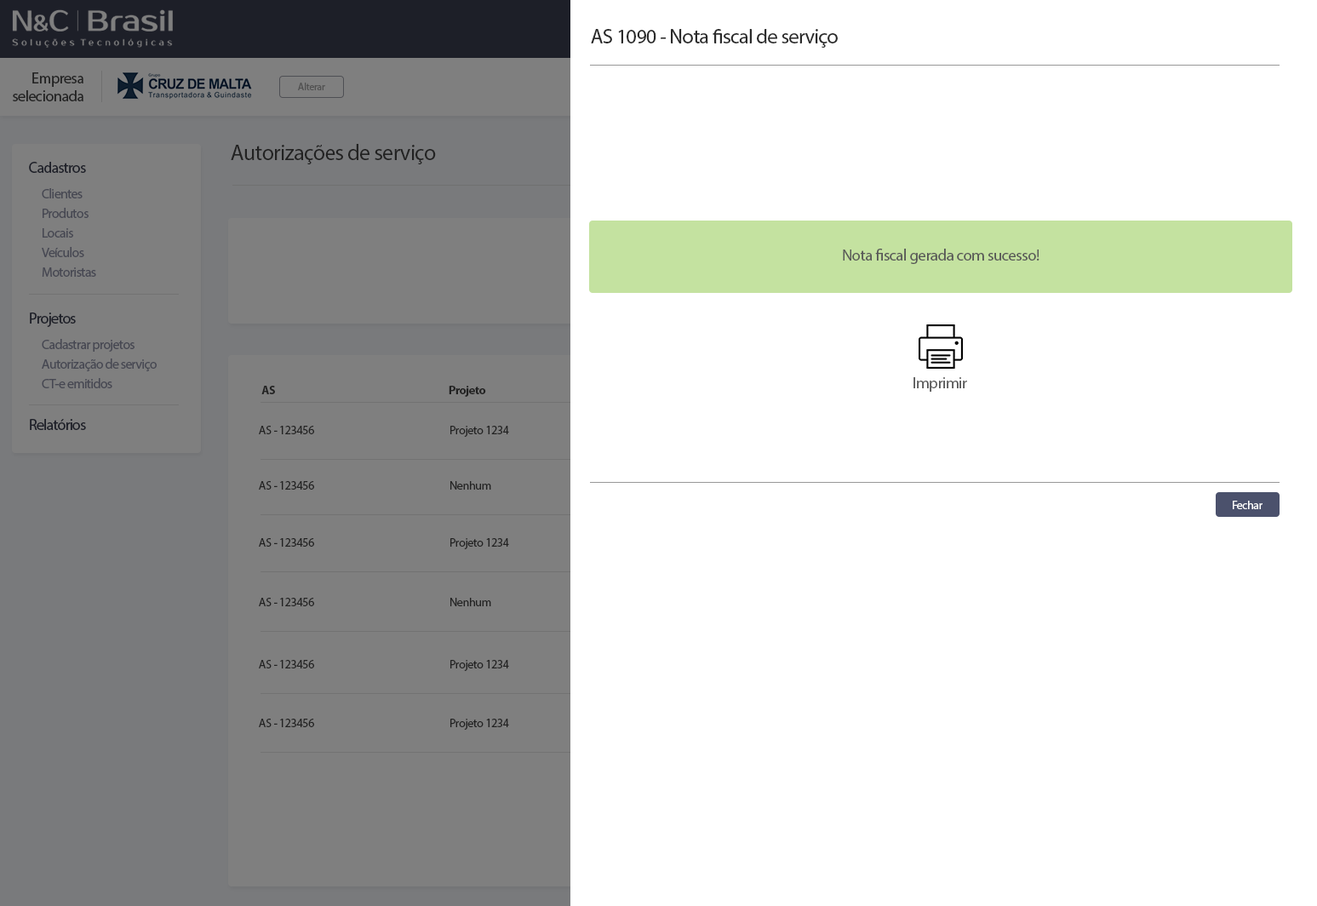
<style>
.page{position:relative;width:1317px;height:906px;background:#ffffff}
.page>*{position:absolute;margin:0}
.t1{font:20.4px "MyriadPro-Regular";letter-spacing:-0.025em;color:#2a2a2a}
.t2{font:15.3px/17.8px "MyriadPro-Regular";letter-spacing:-0.025em;color:#222222}
.t3{font:10.2px "MyriadPro-Regular";letter-spacing:-0.025em;color:#454545}
.t4{font:22.1px "MyriadPro-Regular";letter-spacing:-0.025em;color:#222222}
.t5{font:15.3px "MyriadPro-Regular";letter-spacing:-0.045em;color:#1d1f28}
.t6{font:13.6px "MyriadPro-Regular";letter-spacing:-0.045em;color:#464752}
.t7{font:15.9px "MyriadPro-Regular";letter-spacing:-0.025em;color:#575757}
.t8{font:13.6px "MyriadPro-Regular";letter-spacing:-0.045em;color:#464852}
.t9{font:11.9px "MyriadPro-Bold";letter-spacing:-0.025em;color:#222222}
.t10{font:11.9px "MyriadPro-Regular";letter-spacing:-0.025em;color:#222222}
.t11{font:11.7px "MyriadPro-Regular";letter-spacing:-0.025em;color:#ffffff}
</style>
<div class="page">
<p class="t1" style="left:591px;top:29px;width:247px;height:19px">AS 1090 - Nota fiscal de serviço</p>
<p class="t2" style="left:13px;top:72px;width:70px;height:29px;text-align:right">Empresa<br>selecionada</p>
<p class="t3" style="left:298px;top:83px;width:27px;height:7px">Alterar</p>
<p class="t4" style="left:231px;top:144px;width:205px;height:20px">Autorizações de serviço</p>
<p class="t5" style="left:29px;top:162px;width:57px;height:11px">Cadastros</p>
<p class="t6" style="left:42px;top:188px;width:41px;height:10px">Clientes</p>
<p class="t6" style="left:43px;top:208px;width:46px;height:10px">Produtos</p>
<p class="t6" style="left:43px;top:228px;width:30px;height:9px">Locais</p>
<p class="t6" style="left:42px;top:247px;width:42px;height:10px">Veículos</p>
<p class="t7" style="left:843px;top:249px;width:196px;height:15px">Nota fiscal gerada com sucesso!</p>
<p class="t6" style="left:42px;top:267px;width:54px;height:10px">Motoristas</p>
<p class="t5" style="left:30px;top:312px;width:46px;height:15px">Projetos</p>
<p class="t6" style="left:42px;top:339px;width:92px;height:13px">Cadastrar projetos</p>
<p class="t8" style="left:42px;top:358px;width:115px;height:13px">Autorização de serviço</p>
<p class="t6" style="left:42px;top:378px;width:70px;height:10px">CT-e emitidos</p>
<p class="t7" style="left:913px;top:377px;width:54px;height:15px">Imprimir</p>
<p class="t9" style="left:261px;top:386px;width:14px;height:8px">AS</p>
<p class="t9" style="left:449px;top:386px;width:37px;height:11px">Projeto</p>
<p class="t5" style="left:30px;top:419px;width:56px;height:11px">Relatórios</p>
<p class="t10" style="left:259px;top:426px;width:55px;height:8px">AS - 123456</p>
<p class="t10" style="left:450px;top:426px;width:59px;height:11px">Projeto 1234</p>
<p class="t10" style="left:259px;top:481px;width:55px;height:8px">AS - 123456</p>
<p class="t10" style="left:450px;top:481px;width:41px;height:8px">Nenhum</p>
<p class="t11" style="left:1232px;top:500px;width:30px;height:9px">Fechar</p>
<p class="t10" style="left:259px;top:538px;width:55px;height:8px">AS - 123456</p>
<p class="t10" style="left:450px;top:538px;width:59px;height:11px">Projeto 1234</p>
<p class="t10" style="left:259px;top:598px;width:55px;height:8px">AS - 123456</p>
<p class="t10" style="left:450px;top:598px;width:41px;height:8px">Nenhum</p>
<p class="t10" style="left:259px;top:660px;width:55px;height:8px">AS - 123456</p>
<p class="t10" style="left:450px;top:660px;width:59px;height:11px">Projeto 1234</p>
<p class="t10" style="left:259px;top:718px;width:55px;height:9px">AS - 123456</p>
<p class="t10" style="left:450px;top:718px;width:59px;height:11px">Projeto 1234</p>
</div>
